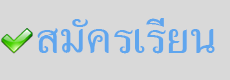
<style>
.page{position:relative;width:230px;height:80px;background:#d9d9d9}
.page>*{position:absolute;margin:0}
.t1{font:60px "CRULanChand56Bold";color:#60a6ee}
</style>
<div class="page">
<p class="t1" style="left:37px;top:18px;width:178px;height:36px">สมัครเรียน</p>
</div>
